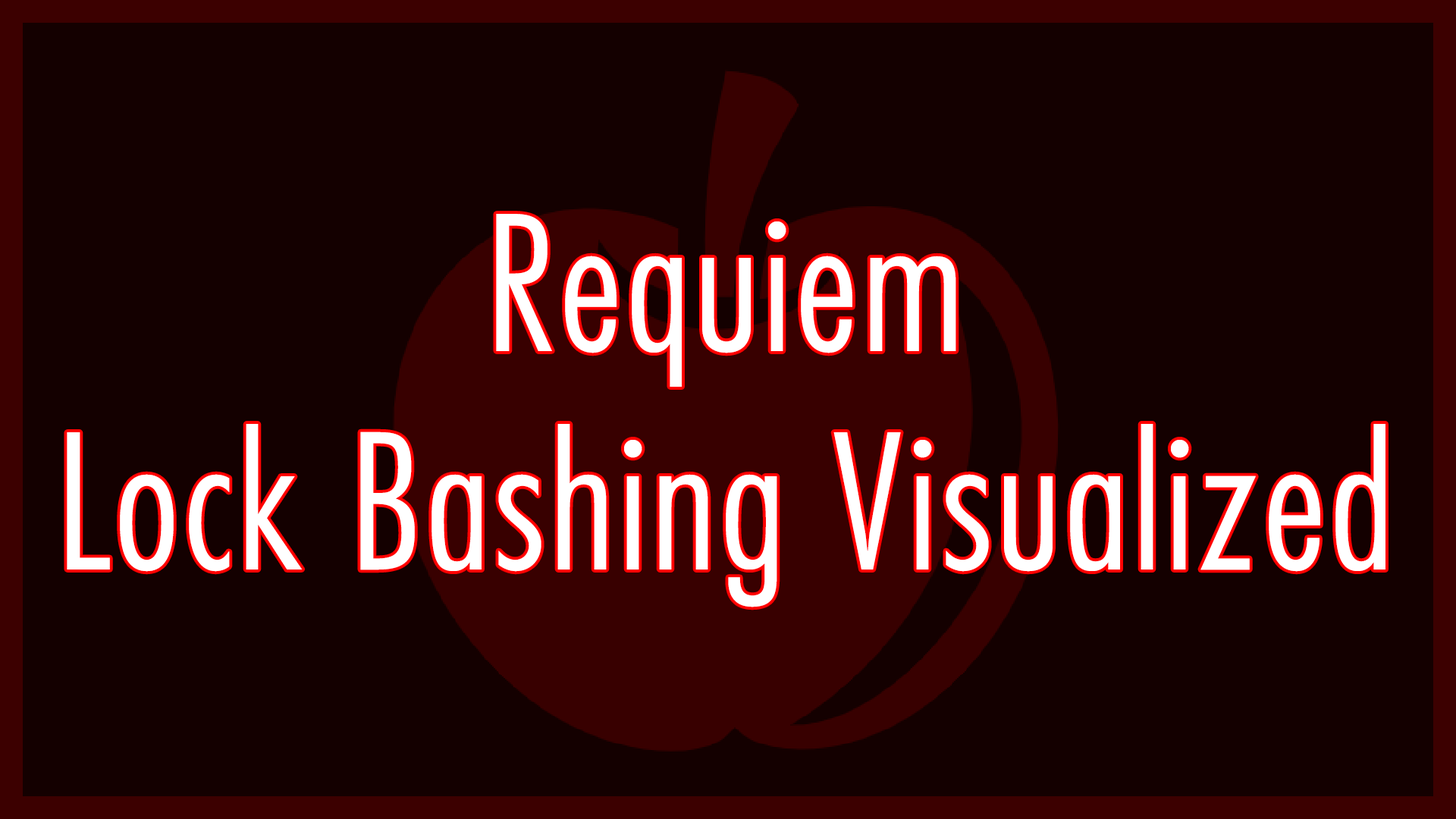
<style>
.page{position:relative;width:1456px;height:819px;background:#140000}
.page>*{position:absolute;margin:0}
.t1{font:181.9px "FuturaStd-CondensedLight";letter-spacing:0.025em;color:#ffffff}
</style>
<div class="page">
<p class="t1" style="left:67px;top:214px;width:1318px;height:393px;text-align:center">Requiem<br>Lock Bashing Visualized</p>
</div>
